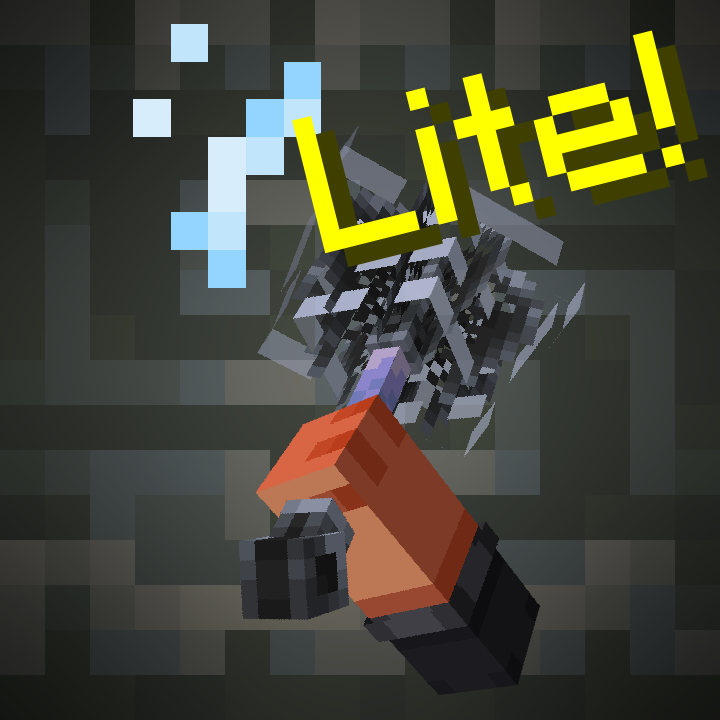
<style>
.page{position:relative;width:720px;height:720px}
.page>*{position:absolute;margin:0}
.t1{font:195.2px "MinecraftSeven";color:#ffff00}
</style>
<div class="page">
<p class="t1" style="left:292px;top:30px;width:393px;height:224px;rotate:-14deg">Lite!</p>
</div>
